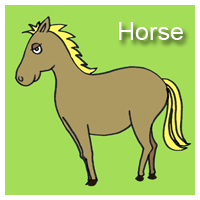
<style>
.page{position:relative;width:200px;height:200px;background:#a4dd58}
.page>*{position:absolute;margin:0}
.t1{font:25px "ArialMT";color:#ffffff}
</style>
<div class="page">
<p class="t1" style="left:119px;top:22px;width:64px;height:18px">Horse</p>
</div>
